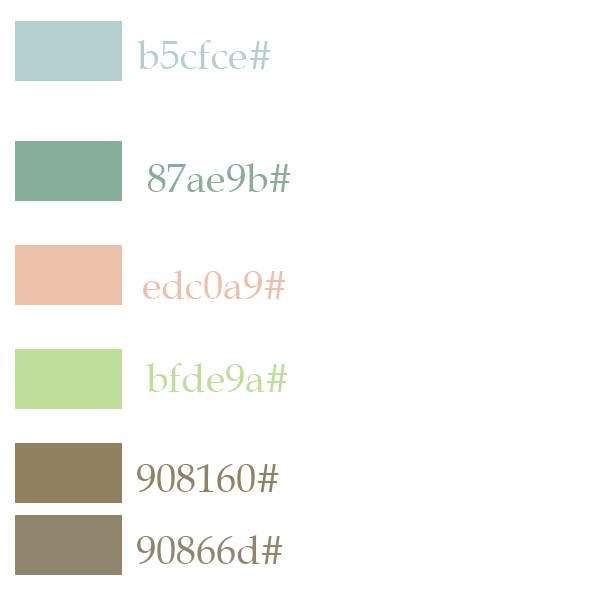
<style>
.page{position:relative;width:600px;height:600px;background:#ffffff}
.page>*{position:absolute;margin:0}
.t1{font:40px "BookAntiqua";color:#b5cfce}
.t2{font:40px "BookAntiqua";color:#87ae9b}
.t3{font:40px "BookAntiqua";color:#edc0a9}
.t4{font:40px "BookAntiqua";color:#bfde9a}
.t5{font:40px "BookAntiqua";color:#908160}
.t6{font:40px "BookAntiqua";color:#90866d}
</style>
<div class="page">
<p class="t1" style="left:137px;top:40px;width:134px;height:29px">#b5cfce</p>
<p class="t2" style="left:148px;top:163px;width:143px;height:29px">#87ae9b</p>
<p class="t3" style="left:143px;top:270px;width:143px;height:29px">#edc0a9</p>
<p class="t4" style="left:146px;top:363px;width:142px;height:29px">#bfde9a</p>
<p class="t5" style="left:137px;top:464px;width:142px;height:28px">#908160</p>
<p class="t6" style="left:137px;top:535px;width:146px;height:29px">#90866d</p>
</div>
